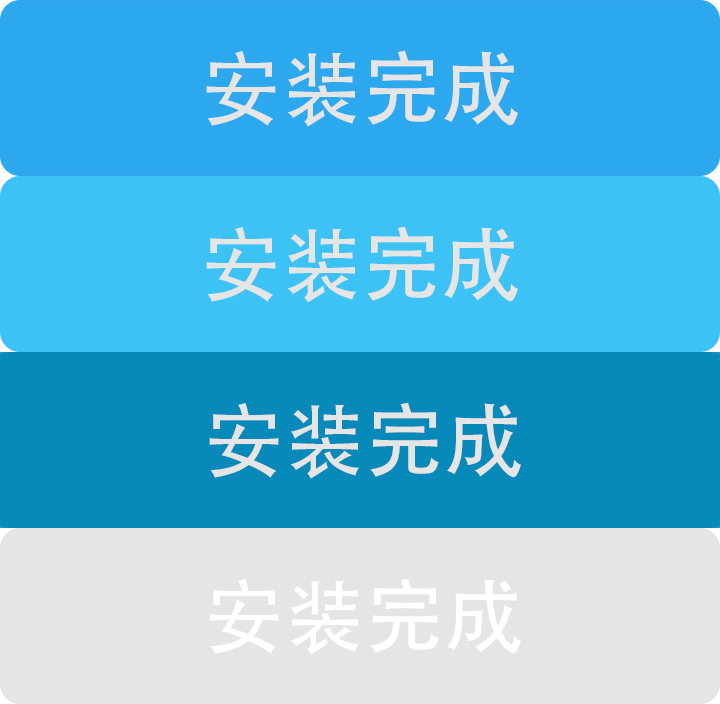
<style>
.page{position:relative;width:720px;height:704px;background:#e5e5e5}
.page>*{position:absolute;margin:0}
.t1{font:80px "AdobeHeitiStd-Regular";color:#e5e5e5}
.t2{font:80px "AdobeHeitiStd-Regular";color:#ffffff}
</style>
<div class="page">
<p class="t1" style="left:206px;top:50px;width:312px;height:77px">安装完成</p>
<p class="t1" style="left:206px;top:226px;width:312px;height:77px">安装完成</p>
<p class="t1" style="left:209px;top:402px;width:312px;height:77px">安装完成</p>
<p class="t2" style="left:209px;top:578px;width:312px;height:77px">安装完成</p>
</div>
